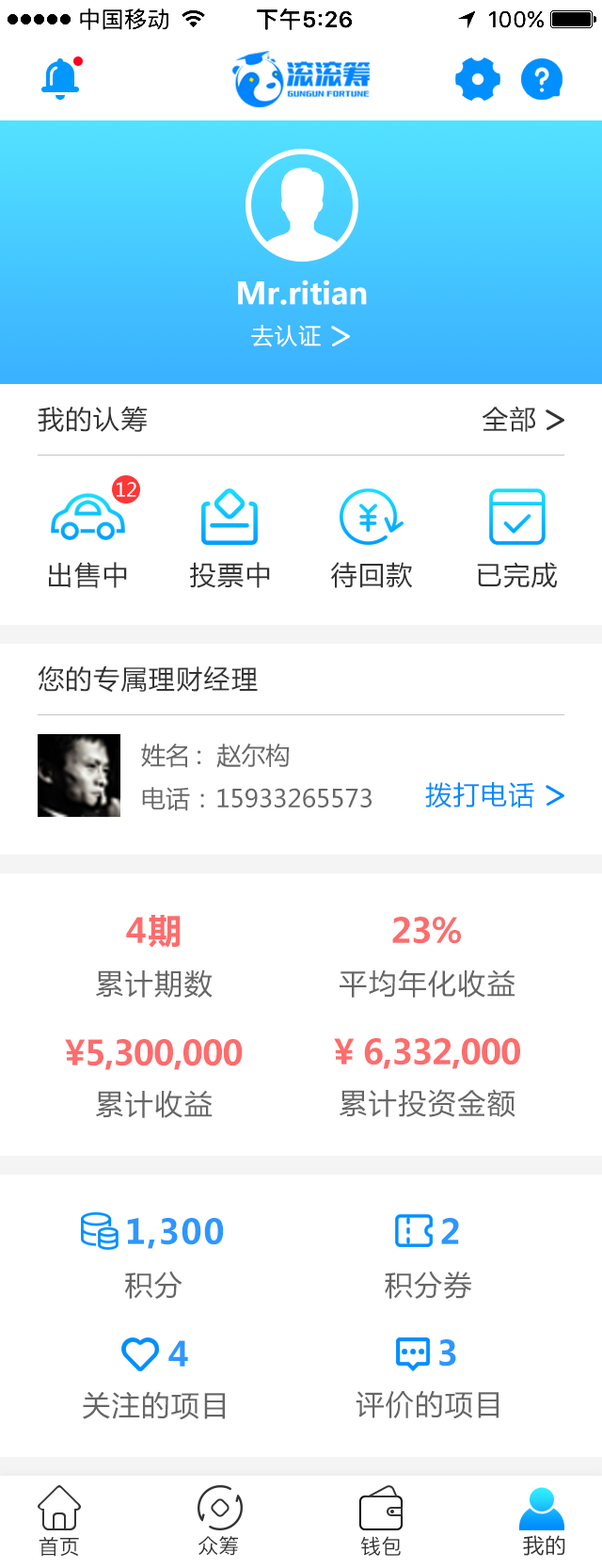
<style>
.page{position:relative;width:602px;height:1568px;background:#ffffff}
.page>*{position:absolute;margin:0}
.t1{font:30.1px "MicrosoftYaHei-Bold";color:#ffffff}
.t2{font:22.6px "MicrosoftYaHei";letter-spacing:0.05em;color:#ffffff}
.t3{font:26.4px "MicrosoftYaHei";letter-spacing:0.05em;color:#333333}
.t4{font:18.8px "MicrosoftYaHei";color:#ffffff}
.t5{font:24.5px "MicrosoftYaHei";color:#666666}
.t6{font:26.4px "MicrosoftYaHei";letter-spacing:0.05em;color:#008aff}
.t7{font:33.9px "MicrosoftYaHei-Bold";letter-spacing:0.05em;color:#fd6d6d}
.t8{font:33.9px "MicrosoftYaHei-Bold";letter-spacing:-0.025em;color:#fd6d6d}
.t9{font:28.2px "MicrosoftYaHei";letter-spacing:0.05em;color:#666666}
.t10{font:33.9px "MicrosoftYaHei-Bold";letter-spacing:0.05em;color:#2c97ff}
.t11{font:33.9px "MicrosoftYaHei-Bold";letter-spacing:-0.025em;color:#2c97ff}
.t12{font:20.7px "PingFangSC-Regular";color:#333333}
.t13{font:20.7px "MicrosoftYaHei";letter-spacing:0.05em;color:#333333}
</style>
<div class="page">
<p class="t1" style="left:238px;top:280px;width:129px;height:25px">Mr.ritian</p>
<p class="t2" style="left:251px;top:325px;width:70px;height:22px">去认证</p>
<p class="t3" style="left:38px;top:407px;width:109px;height:25px">我的认筹</p>
<p class="t3" style="left:482px;top:406px;width:54px;height:26px">全部</p>
<p class="t4" style="left:117px;top:482px;width:19px;height:15px">12</p>
<p class="t3" style="left:49px;top:562px;width:78px;height:26px">出售中</p>
<p class="t3" style="left:190px;top:562px;width:80px;height:26px">投票中</p>
<p class="t3" style="left:331px;top:562px;width:82px;height:26px">待回款</p>
<p class="t3" style="left:477px;top:562px;width:81px;height:26px">已完成</p>
<p class="t3" style="left:38px;top:665px;width:220px;height:28px">您的专属理财经理</p>
<p class="t5" style="left:141px;top:744px;width:148px;height:24px">姓名:  赵尔构</p>
<p class="t6" style="left:425px;top:782px;width:110px;height:26px">拨打电话</p>
<p class="t5" style="left:142px;top:787px;width:230px;height:24px">电话： 15933265573</p>
<p class="t7" style="left:126px;top:915px;width:55px;height:33px">4期</p>
<p class="t8" style="left:392px;top:917px;width:69px;height:27px">23%</p>
<p class="t9" style="left:96px;top:969px;width:117px;height:29px">累计期数</p>
<p class="t9" style="left:340px;top:969px;width:176px;height:29px">平均年化收益</p>
<p class="t8" style="left:65px;top:1039px;width:178px;height:31px">¥5,300,000</p>
<p class="t8" style="left:334px;top:1038px;width:186px;height:31px">¥ 6,332,000</p>
<p class="t9" style="left:96px;top:1090px;width:117px;height:28px">累计收益</p>
<p class="t9" style="left:340px;top:1089px;width:176px;height:28px">累计投资金额</p>
<p class="t10" style="left:127px;top:1218px;width:97px;height:31px">1,300</p>
<p class="t11" style="left:441px;top:1218px;width:18px;height:26px">2</p>
<p class="t9" style="left:125px;top:1271px;width:58px;height:28px">积分</p>
<p class="t9" style="left:385px;top:1271px;width:87px;height:28px">积分券</p>
<p class="t11" style="left:168px;top:1340px;width:20px;height:27px">4</p>
<p class="t11" style="left:440px;top:1339px;width:16px;height:28px">3</p>
<p class="t9" style="left:83px;top:1391px;width:142px;height:29px">关注的项目</p>
<p class="t9" style="left:356px;top:1390px;width:143px;height:29px">评价的项目</p>
<p class="t12" style="left:39px;top:1536px;width:40px;height:21px">首页</p>
<p class="t12" style="left:199px;top:1536px;width:39px;height:20px">众筹</p>
<p class="t12" style="left:360px;top:1536px;width:41px;height:20px">钱包</p>
<p class="t13" style="left:523px;top:1535px;width:43px;height:21px">我的</p>
</div>
